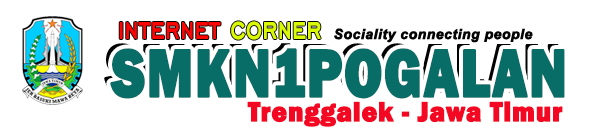
<style>
.page{position:relative;width:600px;height:132px;background:#ffffff}
.page>*{position:absolute;margin:0}
.t1{font:37.9px "EngraversGothicBT-Regular";letter-spacing:0.01em;color:#fb0505;font-weight:bold;scale:0.7 1}
.t2{font:37.9px "EngraversGothicBT-Regular";letter-spacing:0.01em;color:#d9f905;font-weight:bold;scale:0.7 1}
.t3{font:14px "Arial-BoldItalicMT";letter-spacing:0.01em;color:#040404;font-weight:bold}
.t4{font:69.8px "FranklinGothic-Heavy";letter-spacing:0.01em;color:#086d67;font-weight:bold;scale:0.79 1}
.t5{font:28.6px "FranklinGothic-Heavy";letter-spacing:0.01em;color:#f40723;font-weight:bold;scale:0.92 1}
</style>
<div class="page">
<p class="t1" style="left:119px;top:21px;width:202px;height:19px">internet <span class="t2">corner</span></p>
<p class="t3" style="left:334px;top:28px;width:199px;height:15px">Sociality connecting people</p>
<p class="t4" style="left:110px;top:48px;width:455px;height:51px">SMKN1POGALAN</p>
<p class="t5" style="left:247px;top:101px;width:316px;height:26px">Trenggalek - Jawa Timur</p>
</div>
